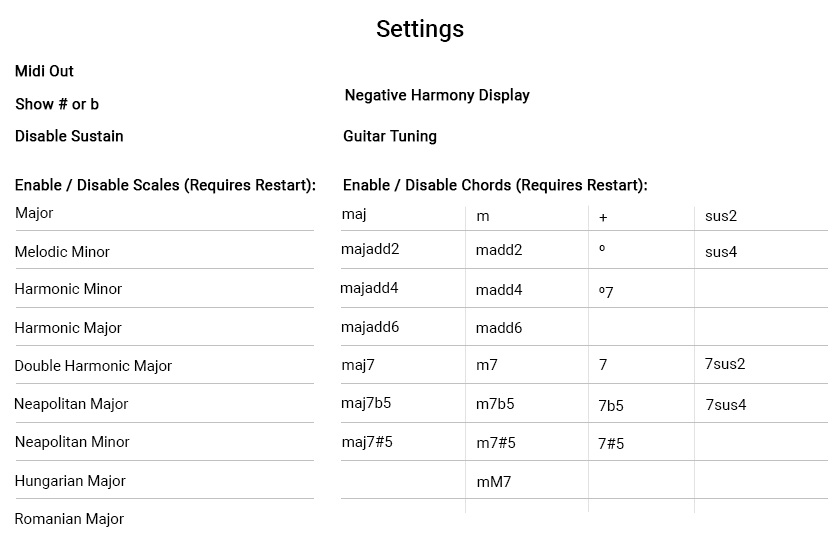
<style>
.page{position:relative;width:839px;height:541px;background:#ffffff}
.page>*{position:absolute;margin:0}
.t1{font:24px "Roboto-Medium";color:#000000}
.t2{font:15px "Roboto-Regular";color:#000000;font-weight:bold}
.t3{font:15px "Roboto-Regular";color:#000000}
</style>
<div class="page">
<p class="t1" style="left:376px;top:19px;width:88px;height:23px">Settings</p>
<p class="t2" style="left:15px;top:65px;width:59px;height:12px">Midi Out</p>
<p class="t2" style="left:345px;top:88px;width:185px;height:16px">Negative Harmony Display</p>
<p class="t2" style="left:15px;top:98px;width:84px;height:12px">Show # or b</p>
<p class="t2" style="left:15px;top:129px;width:108px;height:13px">Disable Sustain</p>
<p class="t2" style="left:343px;top:130px;width:94px;height:15px">Guitar Tuning</p>
<p class="t2" style="left:15px;top:178px;width:301px;height:16px">Enable / Disable Scales (Requires Restart):</p>
<p class="t2" style="left:343px;top:178px;width:304px;height:16px">Enable / Disable Chords (Requires Restart):</p>
<p class="t3" style="left:16px;top:207px;width:38px;height:14px">Major</p>
<p class="t3" style="left:342px;top:208px;width:24px;height:14px">maj</p>
<p class="t3" style="left:477px;top:213px;width:12px;height:8px">m</p>
<p class="t3" style="left:599px;top:214px;width:8px;height:8px">+</p>
<p class="t3" style="left:705px;top:210px;width:32px;height:11px">sus2</p>
<p class="t3" style="left:15px;top:245px;width:95px;height:12px">Melodic Minor</p>
<p class="t3" style="left:341px;top:243px;width:58px;height:14px">majadd2</p>
<p class="t3" style="left:476px;top:244px;width:46px;height:11px">madd2</p>
<p class="t3" style="left:599px;top:245px;width:6px;height:6px">º</p>
<p class="t3" style="left:705px;top:246px;width:32px;height:11px">sus4</p>
<p class="t3" style="left:15px;top:283px;width:107px;height:11px">Harmonic Minor</p>
<p class="t3" style="left:340px;top:282px;width:59px;height:14px">majadd4</p>
<p class="t3" style="left:476px;top:284px;width:47px;height:11px">madd4</p>
<p class="t3" style="left:599px;top:287px;width:15px;height:11px">º7</p>
<p class="t3" style="left:15px;top:322px;width:107px;height:14px">Harmonic Major</p>
<p class="t3" style="left:341px;top:321px;width:58px;height:14px">majadd6</p>
<p class="t3" style="left:476px;top:322px;width:46px;height:11px">madd6</p>
<p class="t3" style="left:15px;top:359px;width:157px;height:15px">Double Harmonic Major</p>
<p class="t3" style="left:342px;top:359px;width:33px;height:14px">maj7</p>
<p class="t3" style="left:477px;top:359px;width:21px;height:11px">m7</p>
<p class="t3" style="left:599px;top:359px;width:8px;height:11px">7</p>
<p class="t3" style="left:705px;top:358px;width:40px;height:11px">7sus2</p>
<p class="t3" style="left:14px;top:397px;width:115px;height:15px">Neapolitan Major</p>
<p class="t3" style="left:341px;top:397px;width:50px;height:14px">maj7b5</p>
<p class="t3" style="left:476px;top:398px;width:38px;height:11px">m7b5</p>
<p class="t3" style="left:598px;top:400px;width:26px;height:11px">7b5</p>
<p class="t3" style="left:706px;top:399px;width:41px;height:11px">7sus4</p>
<p class="t3" style="left:15px;top:435px;width:115px;height:15px">Neapolitan Minor</p>
<p class="t3" style="left:342px;top:436px;width:51px;height:14px">maj7#5</p>
<p class="t3" style="left:477px;top:437px;width:39px;height:11px">m7#5</p>
<p class="t3" style="left:598px;top:438px;width:26px;height:11px">7#5</p>
<p class="t3" style="left:15px;top:475px;width:111px;height:14px">Hungarian Major</p>
<p class="t3" style="left:477px;top:476px;width:34px;height:11px">mM7</p>
<p class="t3" style="left:15px;top:513px;width:109px;height:14px">Romanian Major</p>
</div>
